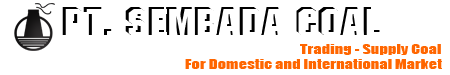
<style>
.page{position:relative;width:450px;height:75px;background:#ffffff}
.page>*{position:absolute;margin:0}
.t1{font:40.3px "MachineITCbyBT-Regular";scale:1.21 1}
.t2{font:40.3px "MachineITCbyBT-Regular";color:#ffffff;scale:1.21 1}
.t3{font:12.6px "Impact";color:#ff6600;scale:1.3 1}
</style>
<div class="page">
<p class="t1" style="left:62px;top:7px;width:318px;height:28px">pt. sembada coal</p>
<p class="t2" style="left:65px;top:9px;width:318px;height:28px">pt. sembada coal</p>
<p class="t3" style="left:300px;top:44px;width:141px;height:11px">Trading - Supply Coal</p>
<p class="t3" style="left:185px;top:59px;width:257px;height:10px">For Domestic and International Market</p>
</div>
